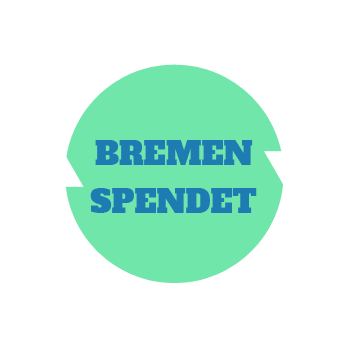
<style>
.page{position:relative;width:350px;height:350px;background:#ffffff}
.page>*{position:absolute;margin:0}
.t1{font:31px/48px "AlfaSlabOne-Regular";color:#1f7cb3}
</style>
<div class="page">
<p class="t1" style="left:90px;top:140px;width:167px;height:73px;text-align:center">BREMEN<br>SPENDET</p>
</div>
